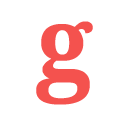
<style>
.page{position:relative;width:128px;height:128px;background:#ffffff}
.page>*{position:absolute;margin:0}
.t1{font:102px "DroidSerif-Bold";color:#f4524e}
</style>
<div class="page">
<p class="t1" style="left:36px;top:21px;width:57px;height:84px">g</p>
</div>
